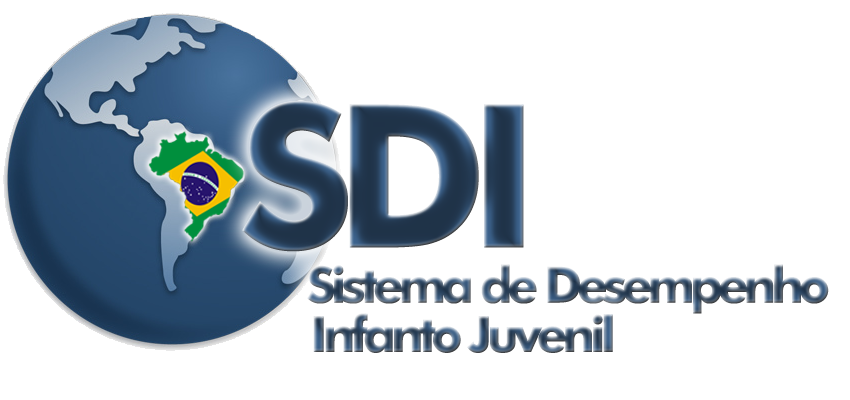
<style>
.page{position:relative;width:850px;height:400px;background:#ffffff}
.page>*{position:absolute;margin:0}
.t1{font:200px "FuturaBT-Bold";letter-spacing:-0.1em}
.t2{font:50px "FuturaBT-Bold";letter-spacing:-0.1em}
</style>
<div class="page">
<p class="t1" style="left:242px;top:101px;width:282px;height:151px">SDI</p>
<p class="t2" style="left:307px;top:264px;width:522px;height:50px">Sistema de Desempenho</p>
<p class="t2" style="left:313px;top:313px;width:300px;height:40px">Infanto Juvenil</p>
</div>
